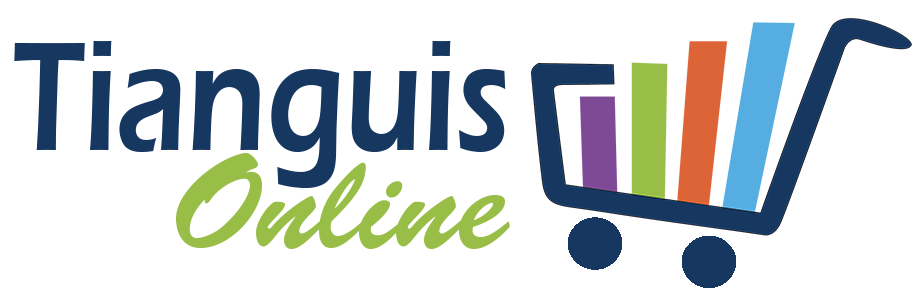
<style>
.page{position:relative;width:920px;height:296px;background:#ffffff}
.page>*{position:absolute;margin:0}
.t1{font:160.5px "ErasITC-Demi";color:#16375f;scale:0.77 1}
.t2{font:135.5px "BrushScriptStd";color:#98be47}
</style>
<div class="page">
<p class="t1" style="left:14px;top:41px;width:492px;height:147px">Tianguis</p>
<p class="t2" style="left:176px;top:152px;width:334px;height:98px">Online</p>
</div>
